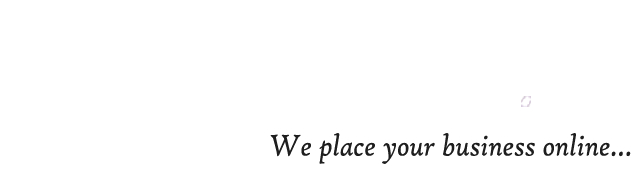
<style>
.page{position:relative;width:639px;height:177px;background:#ffffff}
.page>*{position:absolute;margin:0}
.t1{font:32.3px "HighTowerText-Italic";color:#1e1e1e;scale:0.93 1}
</style>
<div class="page">
<p class="t1" style="left:270px;top:133px;width:361px;height:31px">We place your business online...</p>
</div>
